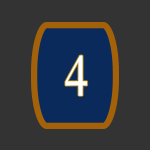
<style>
.page{position:relative;width:150px;height:150px;background:#333333}
.page>*{position:absolute;margin:0}
.t1{font:62.5px "TimesNewRomanPSMT";letter-spacing:0.1em;color:#ffffff;scale:0.75 1}
</style>
<div class="page">
<p class="t1" style="left:65px;top:55px;width:23px;height:41px">4</p>
</div>
